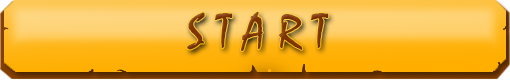
<style>
.page{position:relative;width:510px;height:80px}
.page>*{position:absolute;margin:0}
.t1{font:50px "Mistral";color:#813502}
</style>
<div class="page">
<p class="t1" style="left:187px;top:12px;width:142px;height:39px">S T A R T</p>
</div>
